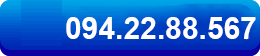
<style>
.page{position:relative;width:260px;height:56px}
.page>*{position:absolute;margin:0}
.t1{font:30px "Arial-BoldMT";color:#ffffff}
</style>
<div class="page">
<p class="t1" style="left:66px;top:17px;width:190px;height:22px">094.22.88.567</p>
</div>
